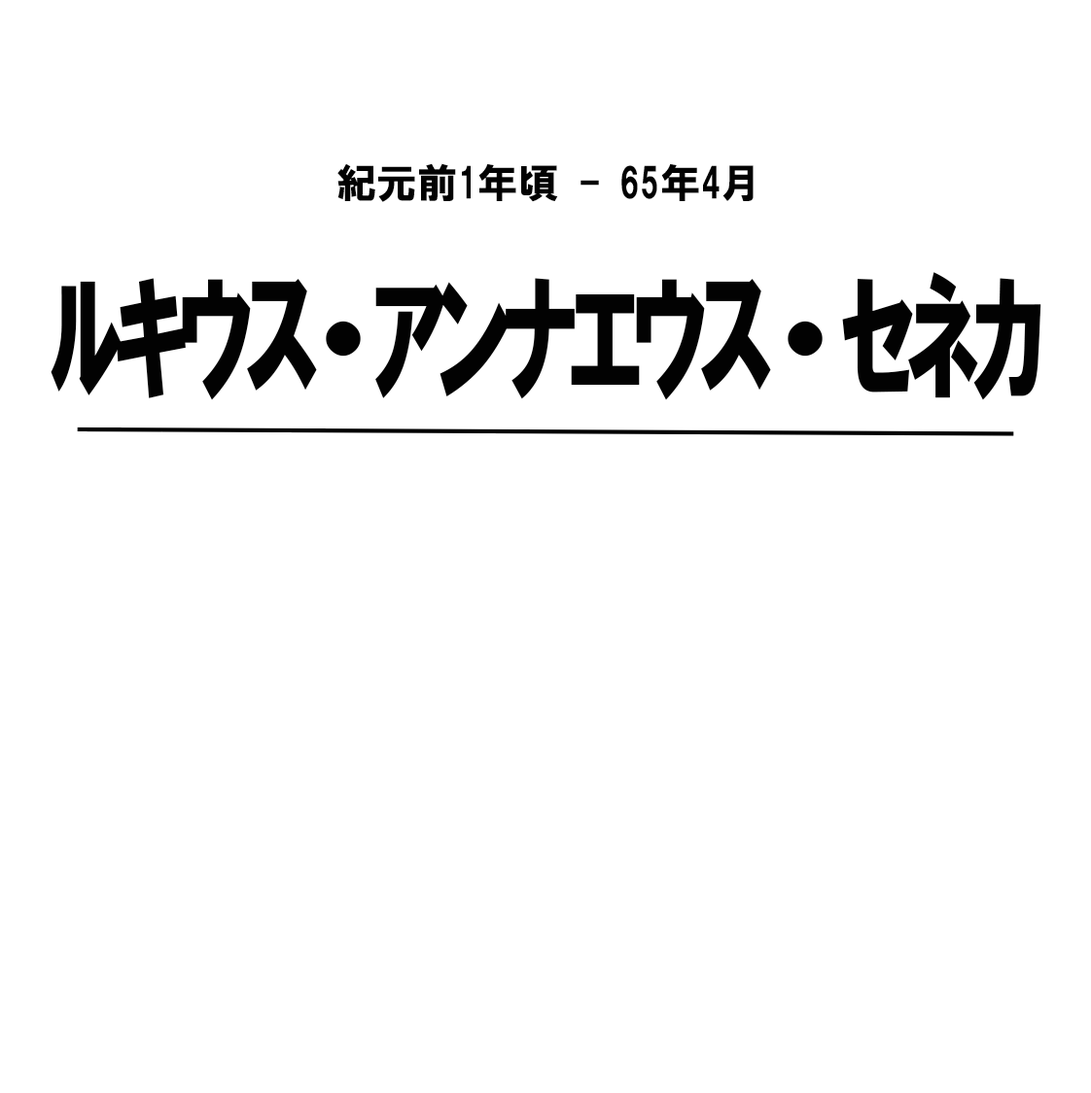
<style>
.page{position:relative;width:1091px;height:1093px;background:#ffffff}
.page>*{position:absolute;margin:0}
.t1{font:40.5px "HGSoeiKakugothicUB";color:#020202}
.t2{font:141.7px "HGSoeiKakugothicUB";letter-spacing:-0.04em;color:#020202}
.t3{font:141.7px "HGSoeiKakugothicUB";letter-spacing:-0.28em;color:#020202}
</style>
<div class="page">
<p class="t1" style="left:337px;top:163px;width:416px;height:39px">紀元前1年頃 - 65年4月</p>
<p class="t2" style="left:51px;top:272px;width:990px;height:128px">ﾙｷｳｽ<span class="t3">・</span>ｱﾝﾅｴｳｽ・ｾﾈｶ</p>
</div>
